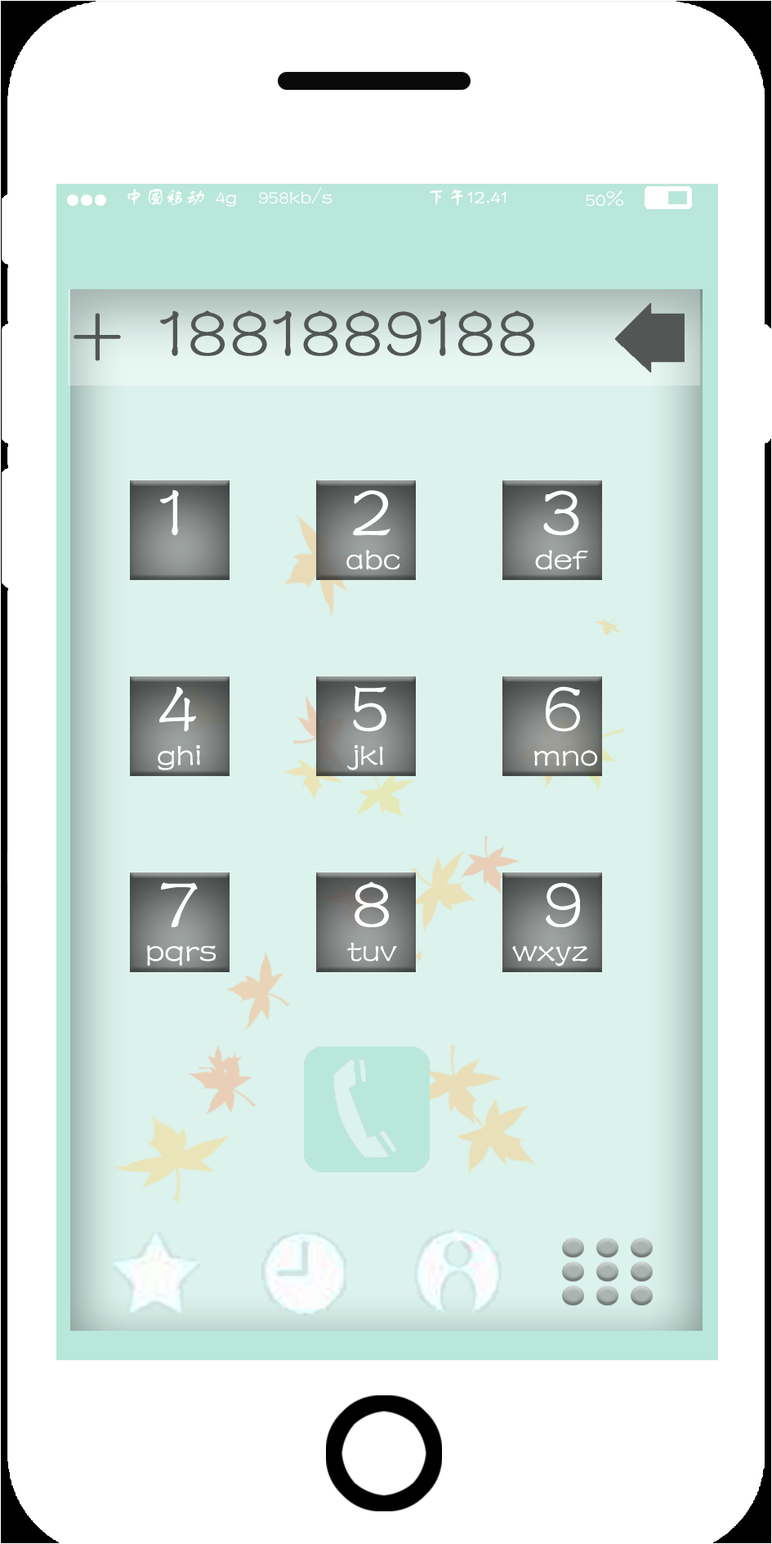
<style>
.page{position:relative;width:772px;height:1544px;background:#ffffff}
.page>*{position:absolute;margin:0}
.t1{font:81.7px "FZSTK--GBK1-0";color:#525756}
.t2{font:34px "FZSTK--GBK1-0";color:#ffffff}
</style>
<div class="page">
<p class="t1" style="left:74px;top:313px;width:47px;height:48px">+</p>
<p class="t1" style="left:160px;top:310px;width:375px;height:46px">1881889188</p>
<p class="t2" style="left:346px;top:550px;width:54px;height:20px">abc</p>
<p class="t2" style="left:535px;top:550px;width:53px;height:20px">def</p>
<p class="t2" style="left:158px;top:745px;width:42px;height:26px">ghi</p>
<p class="t2" style="left:347px;top:745px;width:36px;height:26px">jkl</p>
<p class="t2" style="left:534px;top:750px;width:63px;height:16px">mno</p>
<p class="t2" style="left:147px;top:945px;width:69px;height:22px">pqrs</p>
<p class="t2" style="left:347px;top:942px;width:50px;height:20px">tuv</p>
<p class="t2" style="left:512px;top:945px;width:76px;height:22px">wxyz</p>
</div>
